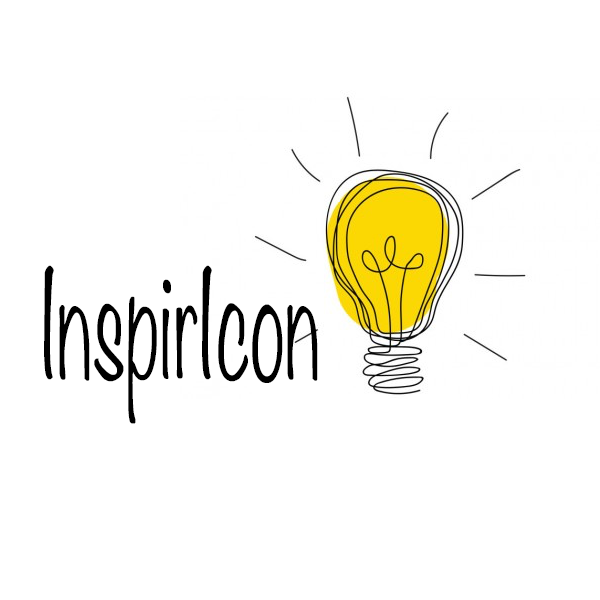
<style>
.page{position:relative;width:600px;height:600px;background:#ffffff}
.page>*{position:absolute;margin:0}
.t1{font:133.9px "Noteworthy-Light";color:#000000;scale:0.57 1}
</style>
<div class="page">
<p class="t1" style="left:44px;top:265px;width:274px;height:159px">InspirIcon</p>
</div>
